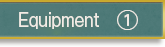
<style>
.page{position:relative;width:165px;height:47px}
.page>*{position:absolute;margin:0}
.t1{font:18px "GothicMB101Pro-Regular";letter-spacing:-0.04em;color:#f2ebe5;scale:0.9 1}
</style>
<div class="page">
<p class="t1" style="left:19px;top:12px;width:80px;height:17px">Equipment</p>
</div>
